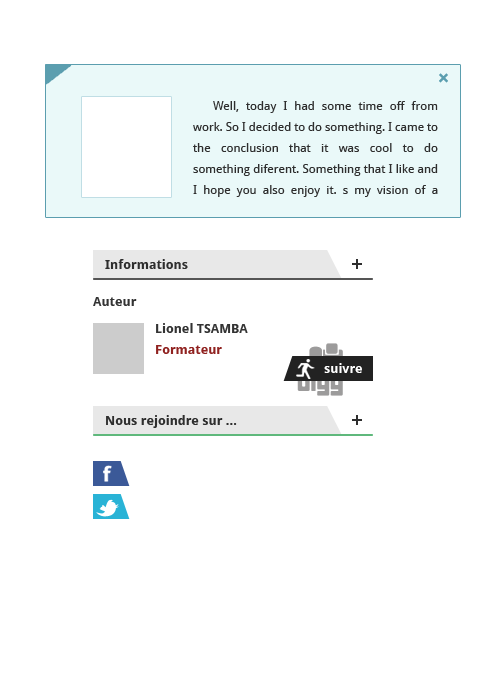
<style>
.page{position:relative;width:500px;height:700px;background:#ffffff}
.page>*{position:absolute;margin:0}
.t1{font:20px "DroidSans-Bold";color:#5b9eaf}
.t2{font:12px/21px "DroidSans";color:#2e2e2e}
.t3{font:13px "DroidSans-Bold";color:#2e2e2e}
.t4{font:13px "DroidSans-Bold";color:#333333}
.t5{font:13px "DroidSans-Bold";color:#902220}
.t6{font:13px "DroidSans-Bold";color:#ffffff}
</style>
<div class="page">
<p class="t1" style="left:439px;top:73px;width:9px;height:10px">×</p>
<p class="t2" style="left:193px;top:101px;width:245px;height:96px;text-align:justify">Well, today I had some time off from work. So I decided to do something. I came to the conclusion that it was cool to do something diferent. Something that I like and I hope you also enjoy it. s my vision of a perfect (second) step when You buying some things in online store. Its clean and nice.</p>
<p class="t3" style="left:105px;top:259px;width:83px;height:10px">Informations</p>
<p class="t4" style="left:93px;top:297px;width:44px;height:9px">Auteur</p>
<p class="t4" style="left:156px;top:323px;width:92px;height:10px">Lionel TSAMBA</p>
<p class="t5" style="left:156px;top:345px;width:66px;height:9px">Formateur</p>
<p class="t6" style="left:324px;top:363px;width:38px;height:10px">suivre</p>
<p class="t3" style="left:106px;top:415px;width:131px;height:13px">Nous rejoindre sur ...</p>
</div>
